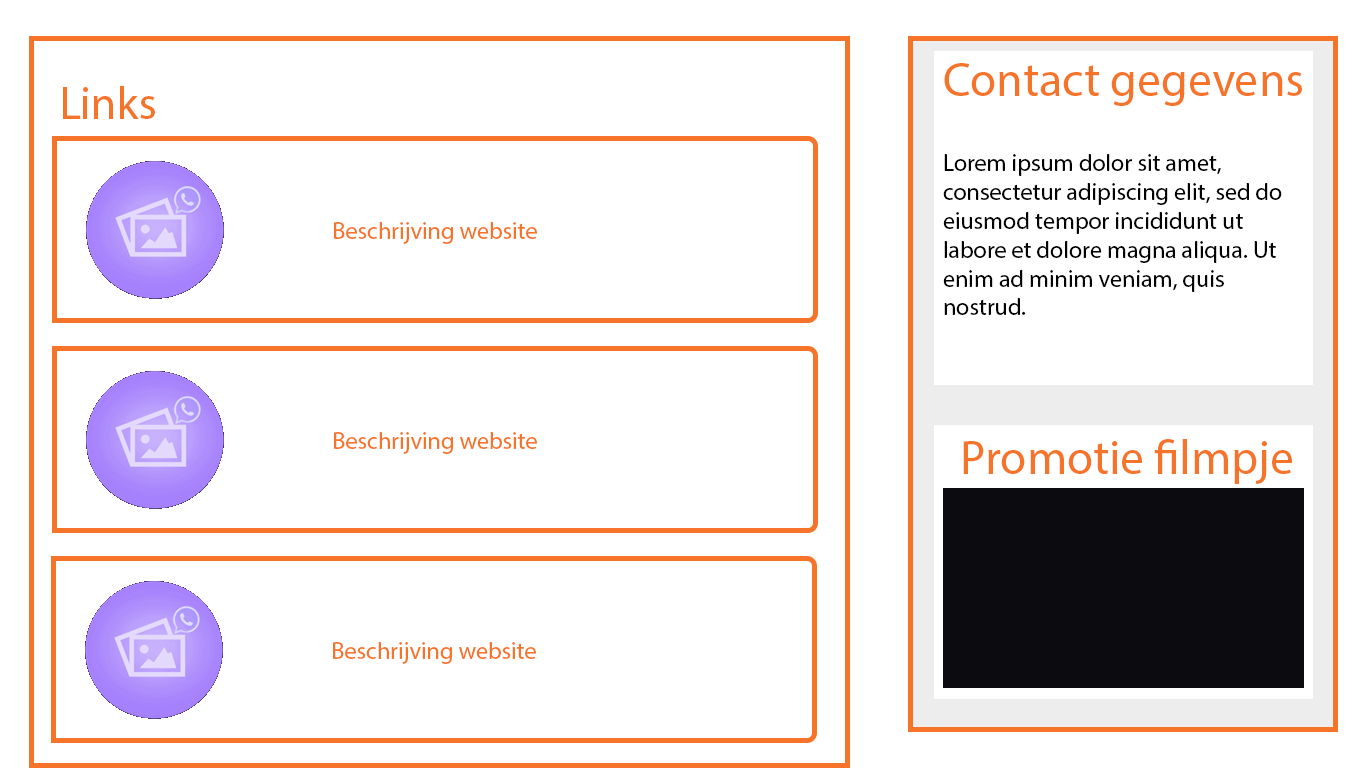
<style>
.page{position:relative;width:1366px;height:768px;background:#ffffff}
.page>*{position:absolute;margin:0}
.t1{font:48px "MyriadPro-Regular";color:#f67429}
.t2{font:46.2px "MyriadPro-Regular";color:#f67429}
.t3{font:24px "MyriadPro-Regular";color:#000000}
.t4{font:24px "MyriadPro-Regular";color:#f67429}
</style>
<div class="page">
<p class="t1" style="left:944px;top:63px;width:358px;height:43px">Contact gegevens</p>
<p class="t2" style="left:63px;top:86px;width:92px;height:33px">Links</p>
<p class="t3" style="left:943px;top:154px;width:339px;height:161px"><span class="t1"><br><br></span>Lorem ipsum dolor sit amet, consectetur adipiscing elit, sed do eiusmod tempor incididunt ut labore et dolore magna aliqua. Ut enim ad minim veniam, quis nostrud.</p>
<p class="t4" style="left:334px;top:222px;width:203px;height:22px">Beschrijving website</p>
<p class="t4" style="left:334px;top:432px;width:203px;height:22px">Beschrijving website</p>
<p class="t1" style="left:963px;top:439px;width:329px;height:45px">Promotie filmpje</p>
<p class="t4" style="left:333px;top:642px;width:203px;height:22px">Beschrijving website</p>
</div>
